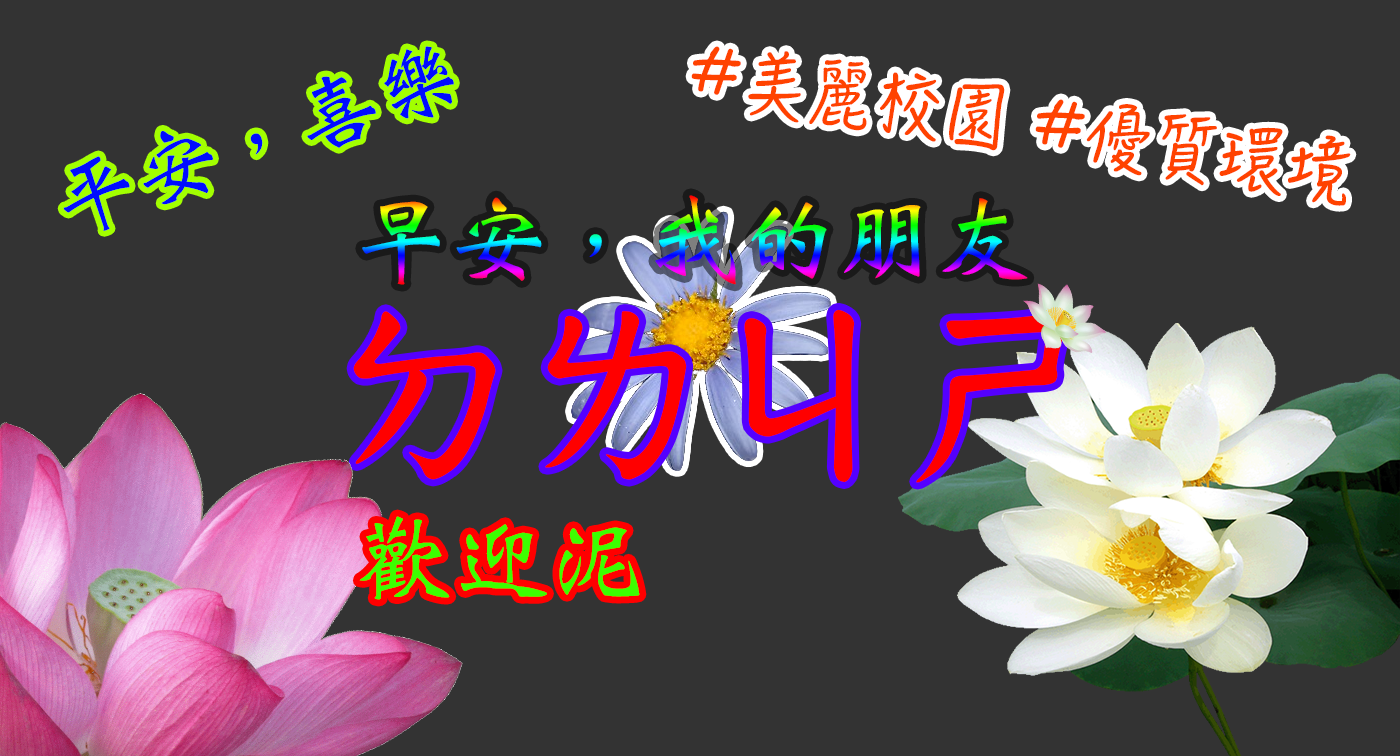
<style>
.page{position:relative;width:1400px;height:756px;background:#333333}
.page>*{position:absolute;margin:0}
.t1{font:85.2px "WeibeiTC-Bold";color:#000cff}
.t2{font:66.2px "HanziPenTC-W5";color:#ff4200}
.t3{font:97.1px "WeibeiTC-Bold"}
.t4{font:190.5px "WeibeiTC-Bold";color:#ff0000}
.t5{font:97.1px "WeibeiTC-Bold";color:#3cff00}
</style>
<div class="page">
<p class="t1" style="left:63px;top:46px;width:391px;height:185px;rotate:-19deg">平安，喜樂</p>
<p class="t2" style="left:691px;top:46px;width:660px;height:160px;rotate:9deg">#美麗校園 #優質環境</p>
<p class="t3" style="left:362px;top:195px;width:666px;height:90px">早安，我的朋友</p>
<p class="t4" style="left:353px;top:310px;width:713px;height:173px">ㄉㄌㄐㄕ</p>
<p class="t5" style="left:359px;top:516px;width:281px;height:84px">歡迎泥</p>
</div>
